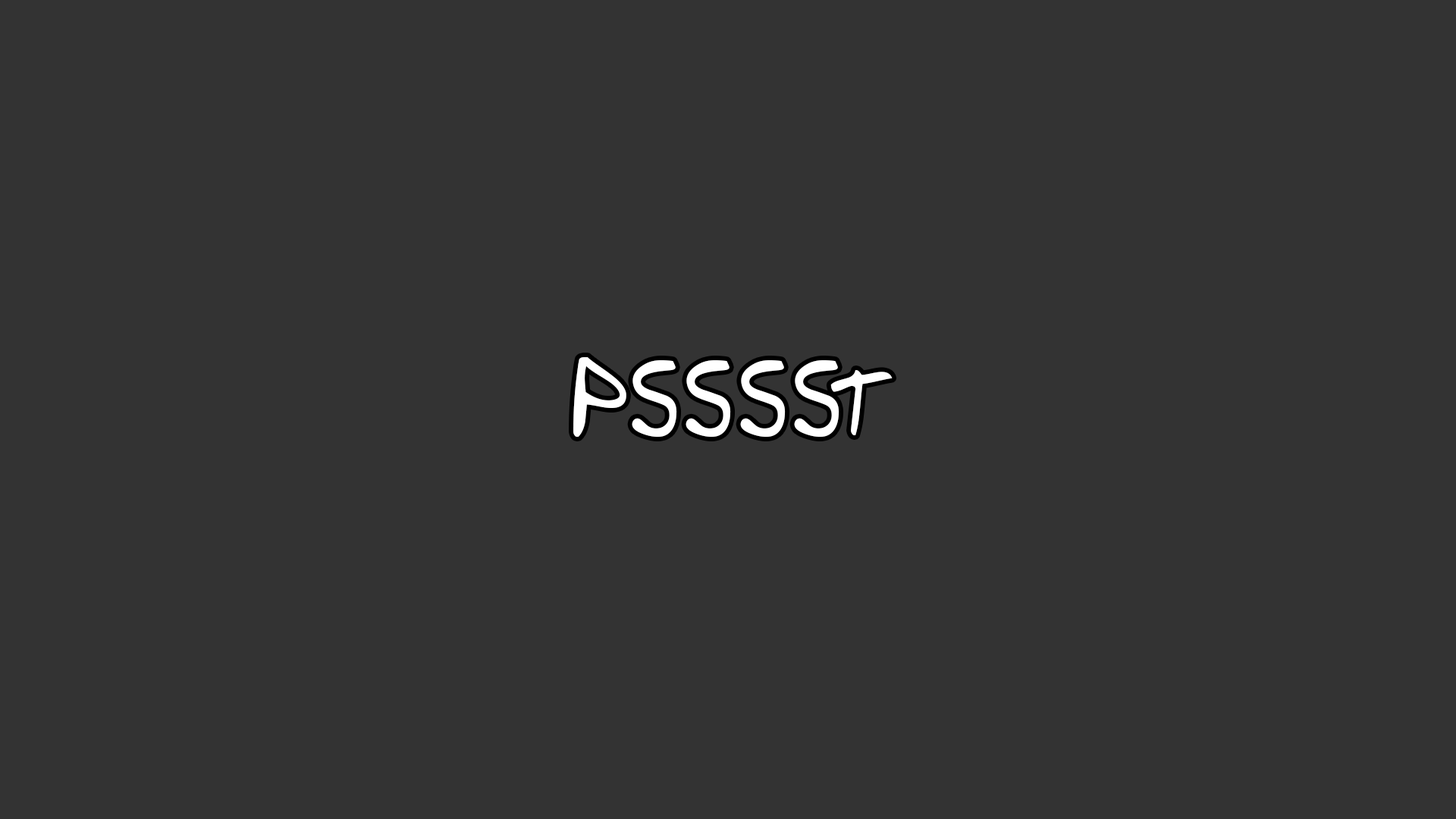
<style>
.page{position:relative;width:1456px;height:819px;background:#333333}
.page>*{position:absolute;margin:0}
.t1{font:106.9px "DomesticManners";letter-spacing:0.04em;color:#ffffff}
</style>
<div class="page">
<p class="t1" style="left:573px;top:357px;width:320px;height:80px">PSSSST</p>
</div>
